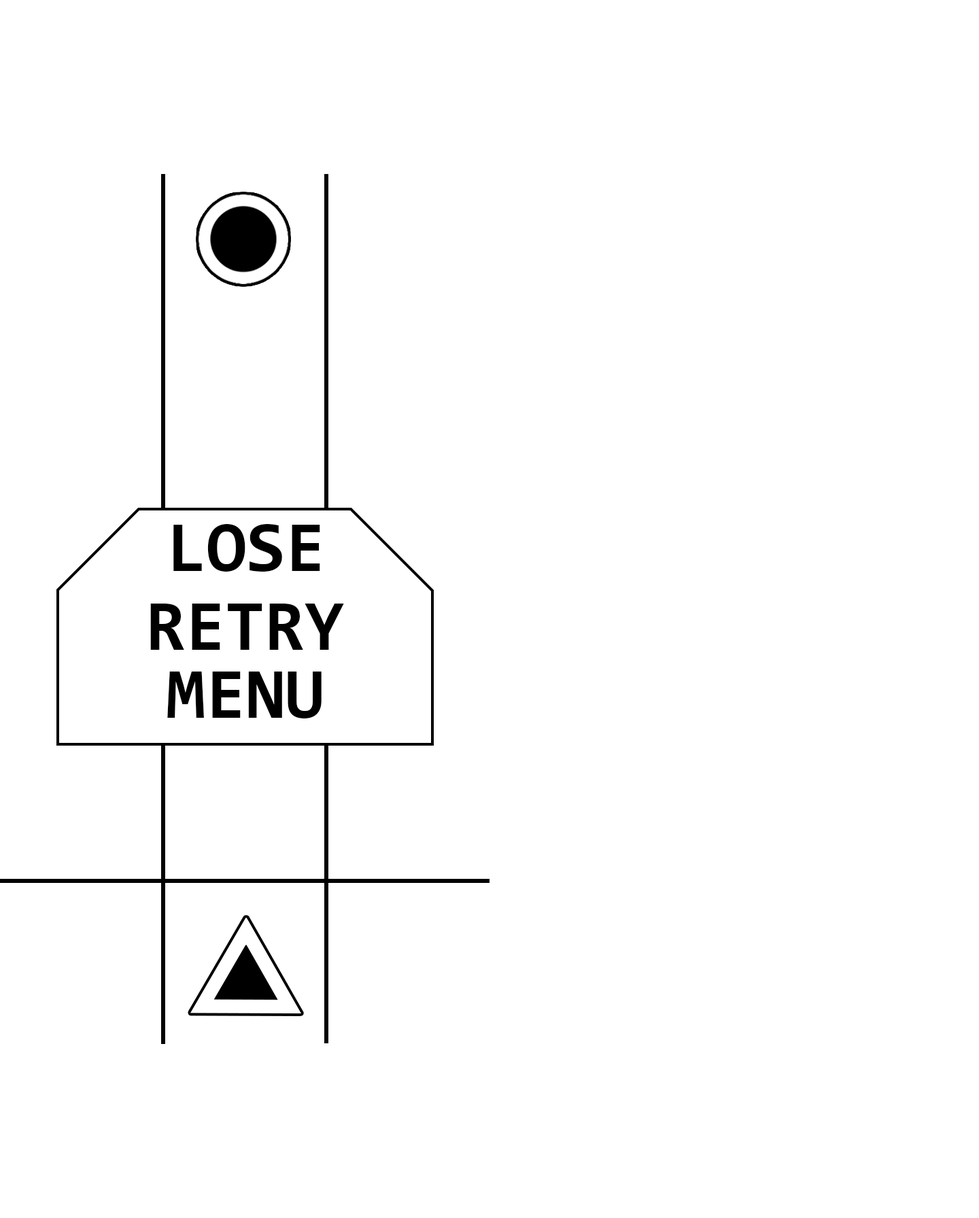
<style>
.page{position:relative;width:979px;height:1218px;background:#ffffff}
.page>*{position:absolute;margin:0}
.t1{font:72.1px "Consolas-Bold";color:#000000}
</style>
<div class="page">
<p class="t1" style="left:173px;top:524px;width:147px;height:48px">LOSE</p>
<p class="t1" style="left:150px;top:604px;width:194px;height:46px">RETRY</p>
<p class="t1" style="left:167px;top:672px;width:155px;height:47px">MENU</p>
</div>
